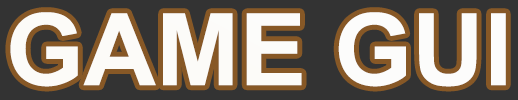
<style>
.page{position:relative;width:518px;height:100px;background:#333333}
.page>*{position:absolute;margin:0}
.t1{font:100px "Arial-BoldMT";color:#ffffff}
</style>
<div class="page">
<p class="t1" style="left:10px;top:12px;width:496px;height:75px">GAME GUI</p>
</div>
